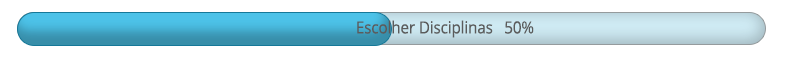
<style>
.page{position:relative;width:786px;height:60px;background:#ffffff}
.page>*{position:absolute;margin:0}
.t1{font:16.7px "OpenSans";letter-spacing:-0.01em;color:#5b5b5b;scale:0.92 1}
</style>
<div class="page">
<p class="t1" style="left:357px;top:20px;width:177px;height:18px">Escolher Disciplinas   50%</p>
</div>
